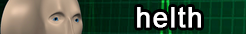
<style>
.page{position:relative;width:246px;height:34px}
.page>*{position:absolute;margin:0}
.t1{font:27.2px "ArialMT";letter-spacing:0.05em;color:#ffffff;font-weight:bold}
</style>
<div class="page">
<p class="t1" style="left:137px;top:7px;width:64px;height:21px">helth</p>
</div>
